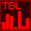
<style>
.page{position:relative;width:31px;height:31px;background:#320000}
.page>*{position:absolute;margin:0}
.t1{font:10px "rktr7rg";color:#ff0000}
</style>
<div class="page">
<p class="t1" style="left:2px;top:2px;width:19px;height:7px">TBL</p>
</div>
